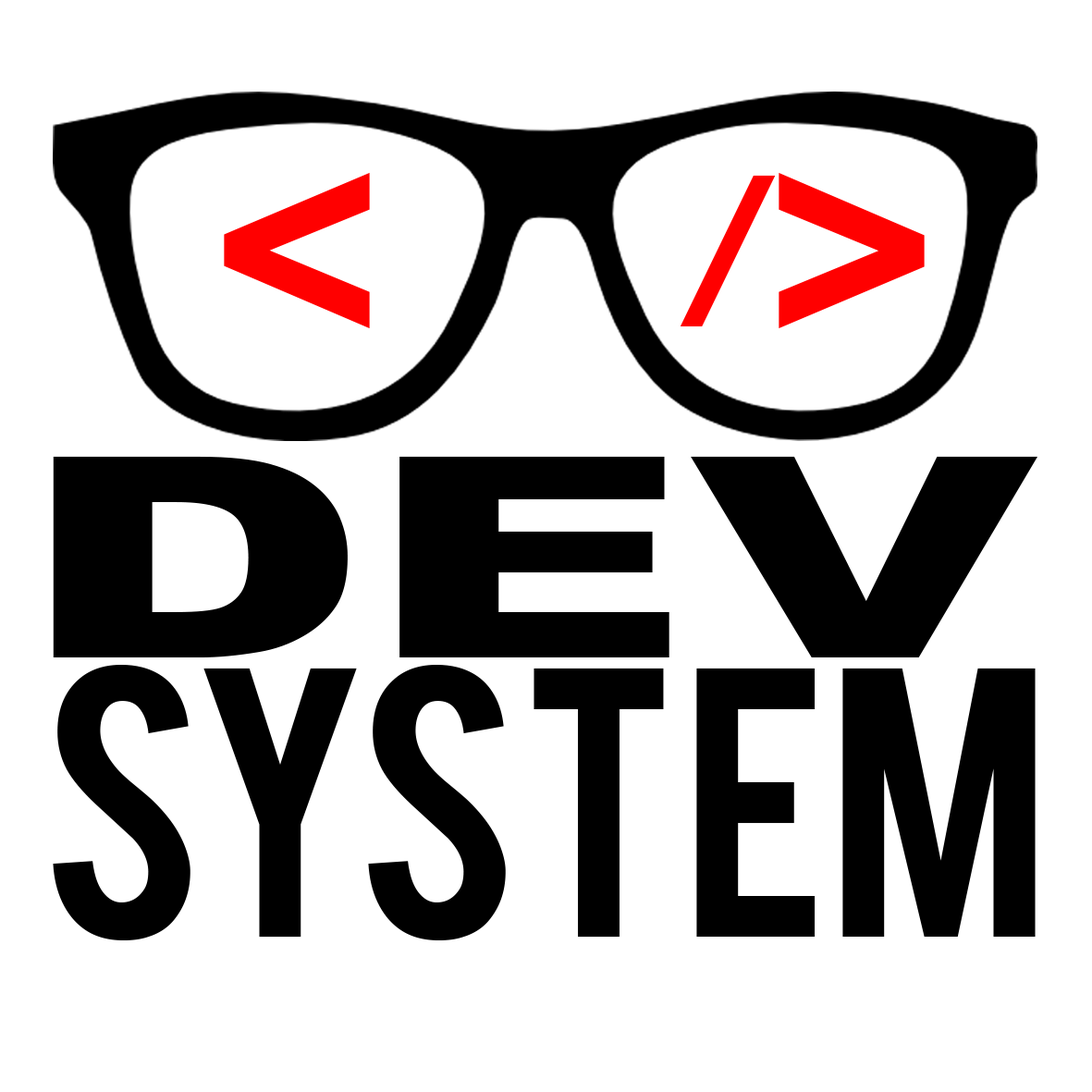
<style>
.page{position:relative;width:1092px;height:1092px;background:#ffffff}
.page>*{position:absolute;margin:0}
.t1{font:322.3px "Bebas";color:#ff0000}
.t2{font:154.1px "Bebas";color:#ff0000;scale:1.28 1}
.t3{font:280.3px "Arial-Black";color:#000000;scale:1.59 1}
.t4{font:301.7px "Bebas";color:#000000}
</style>
<div class="page">
<p class="t1" style="left:224px;top:172px;width:146px;height:156px">&lt;</p>
<p class="t1" style="left:779px;top:172px;width:146px;height:156px">&gt;</p>
<p class="t2" style="left:681px;top:175px;width:95px;height:151px">/</p>
<p class="t3" style="left:53px;top:456px;width:984px;height:201px">DEV</p>
<p class="t4" style="left:53px;top:664px;width:983px;height:276px">SYSTEM</p>
</div>
